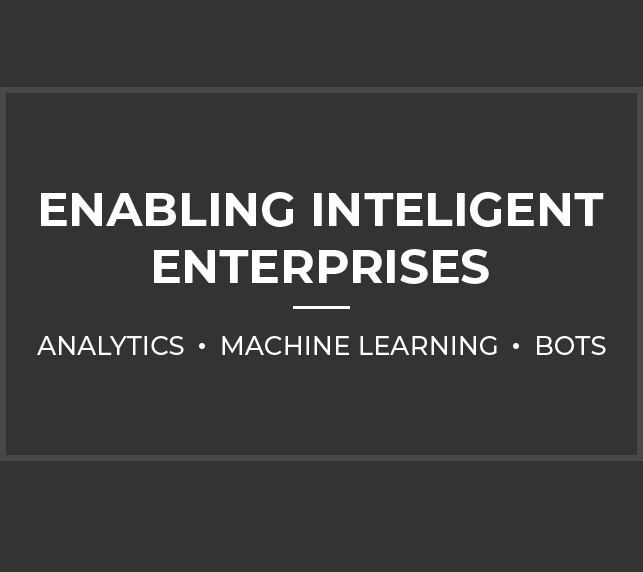
<style>
.page{position:relative;width:643px;height:572px;background:#333333}
.page>*{position:absolute;margin:0}
.t1{font:47.1px "Montserrat-Bold";color:#ffffff;text-transform:uppercase}
.t2{font:26.1px "Montserrat-Medium";color:#ffffff;text-transform:uppercase}
</style>
<div class="page">
<p class="t1" style="left:41px;top:192px;width:563px;height:92px;text-align:center">Enabling Inteligent<br>Enterprises</p>
<p class="t2" style="left:37px;top:336px;width:569px;height:19px">Analytics     Machine Learning     Bots</p>
</div>
